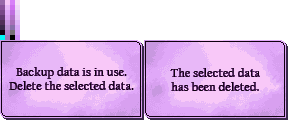
<style>
.page{position:relative;width:288px;height:120px;background:#ffffff}
.page>*{position:absolute;margin:0}
.t1{font:12px/14px "CalifornianFB-Reg";letter-spacing:0.025em;color:#100010}
</style>
<div class="page">
<p class="t1" style="left:9px;top:67px;width:125px;height:23px;text-align:center">Backup data is in use.<br>Delete the selected data.</p>
<p class="t1" style="left:170px;top:68px;width:90px;height:23px;text-align:center">The selected data<br>has been deleted.</p>
</div>
